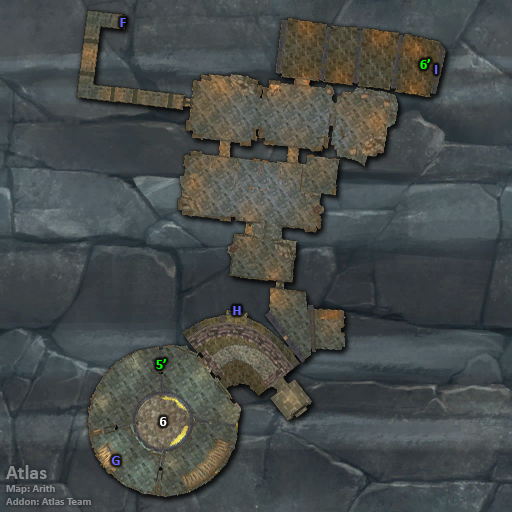
<style>
.page{position:relative;width:512px;height:512px}
.page>*{position:absolute;margin:0}
.t1{font:14px "Calibri-Bold";color:#6666ff}
.t2{font:14px "Calibri-Bold";color:#00ff00}
.t3{font:14px "Calibri-Bold";color:#ffffff}
.t4{font:11px "Calibri-Bold";color:#8a8d8f}
.t5{font:20px "Calibri-Bold";color:#8a8d8f}
</style>
<div class="page">
<p class="t1" style="left:120px;top:18px;width:6px;height:9px">F</p>
<p class="t2" style="left:420px;top:59px;width:10px;height:10px">6’</p>
<p class="t1" style="left:435px;top:65px;width:3px;height:9px">I</p>
<p class="t1" style="left:233px;top:306px;width:8px;height:9px">H</p>
<p class="t2" style="left:156px;top:359px;width:10px;height:10px">5’</p>
<p class="t3" style="left:160px;top:417px;width:7px;height:9px">6</p>
<p class="t1" style="left:111px;top:456px;width:9px;height:9px">G</p>
<p class="t4" style="left:6px;top:465px;width:85px;height:40px"><span class="t5">Atlas<br></span>Map: Arith<br>Addon: Atlas Team</p>
</div>
